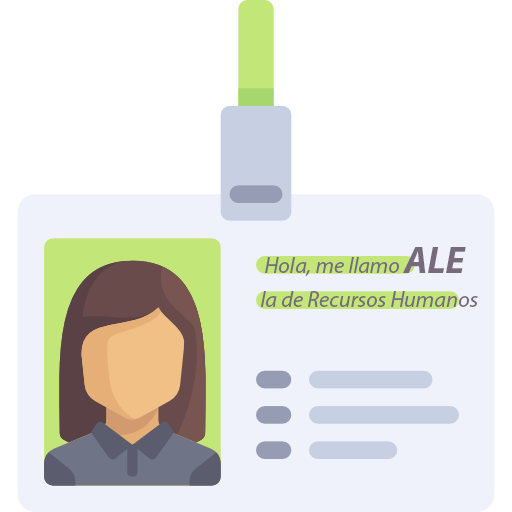
<style>
.page{position:relative;width:512px;height:512px;background:#ffffff}
.page>*{position:absolute;margin:0}
.t1{font:22.5px "MyriadPro-It";color:#766a7c}
.t2{font:37.5px "MyriadPro-BoldIt";color:#766a7c}
</style>
<div class="page">
<p class="t1" style="left:265px;top:257px;width:135px;height:19px">Hola, me llamo</p>
<p class="t2" style="left:403px;top:247px;width:63px;height:26px">ALE</p>
<p class="t1" style="left:261px;top:291px;width:217px;height:16px">la de Recursos Humanos</p>
</div>
